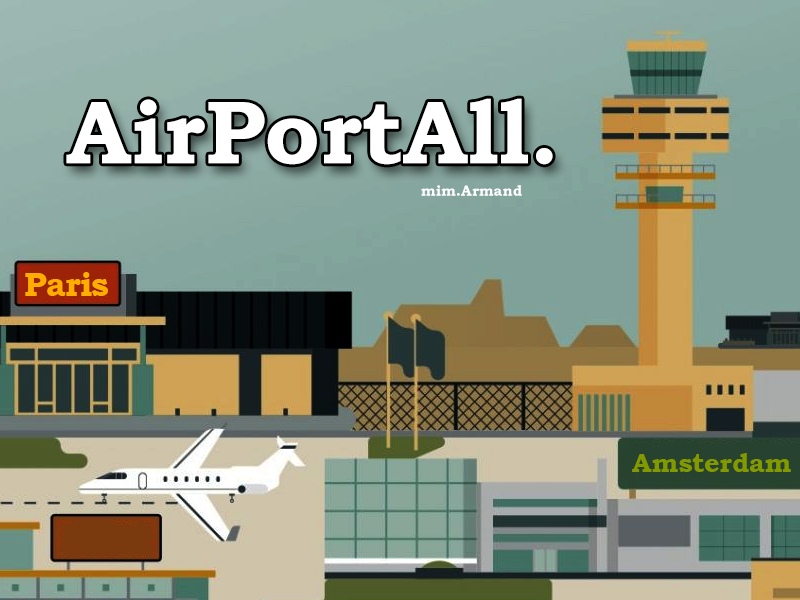
<style>
.page{position:relative;width:800px;height:600px}
.page>*{position:absolute;margin:0}
.t1{font:90px "BookmanOldStyle-Bold";color:#ffffff}
.t2{font:15px "BookmanOldStyle-Bold";color:#ffffff}
.t3{font:33.9px "BookmanOldStyle-Bold";letter-spacing:-0.018em;color:#ffae00}
.t4{font:27.5px "BookmanOldStyle-Bold";letter-spacing:-0.018em;color:#819800}
</style>
<div class="page">
<p class="t1" style="left:66px;top:98px;width:487px;height:67px">AirPortAll.</p>
<p class="t2" style="left:421px;top:185px;width:101px;height:11px">mim.Armand</p>
<p class="t3" style="left:25px;top:272px;width:83px;height:24px">Paris</p>
<p class="t4" style="left:632px;top:453px;width:159px;height:19px">Amsterdam</p>
</div>
